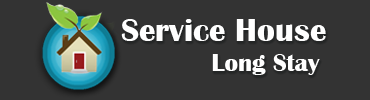
<style>
.page{position:relative;width:370px;height:100px;background:#333333}
.page>*{position:absolute;margin:0}
.t1{font:33px "BritannicBold";color:#ffffff}
.t2{font:25px "BritannicBold";color:#ffffff}
</style>
<div class="page">
<p class="t1" style="left:121px;top:19px;width:205px;height:56px">Service House<br> <span class="t2">Long Stay</span></p>
</div>
